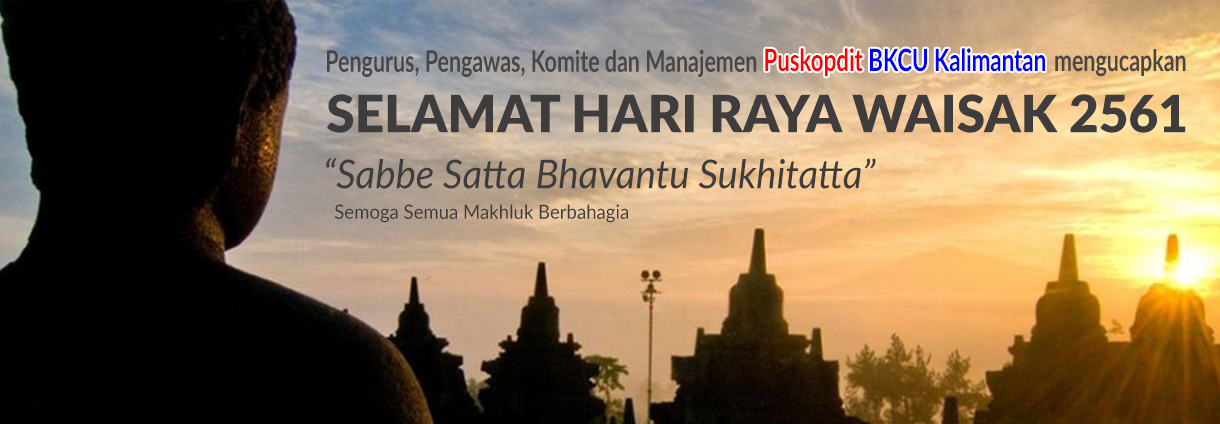
<style>
.page{position:relative;width:1220px;height:424px}
.page>*{position:absolute;margin:0}
.t1{font:29.5px "Lato-Bold";color:#494644;scale:0.73 1}
.t2{font:30.5px "Lato-Bold";color:#0000ff;scale:0.73 1}
.t3{font:30.5px "Lato-Bold";color:#fe0101;scale:0.73 1}
.t4{font:51.6px "Lato-Black";color:#3e3c3c}
.t5{font:39.9px "Lato-Italic";color:#3e3c3c;scale:0.96 1}
.t6{font:19.3px "Lato-Regular";color:#3e3c3c;scale:0.96 1}
</style>
<div class="page">
<p class="t1" style="left:327px;top:49px;width:430px;height:28px">Pengurus, Pengawas, Komite dan Manajemen</p>
<p class="t2" style="left:765px;top:48px;width:280px;height:29px"><span class="t3">Puskopdit </span>BKCU Kalimantan</p>
<p class="t1" style="left:1055px;top:49px;width:131px;height:28px">mengucapkan</p>
<p class="t4" style="left:327px;top:94px;width:859px;height:39px">SELAMAT HARI RAYA WAISAK 2561</p>
<p class="t5" style="left:326px;top:157px;width:550px;height:32px">“Sabbe Satta Bhavantu Sukhitatta”</p>
<p class="t6" style="left:334px;top:204px;width:294px;height:19px">Semoga Semua Makhluk Berbahagia</p>
</div>
